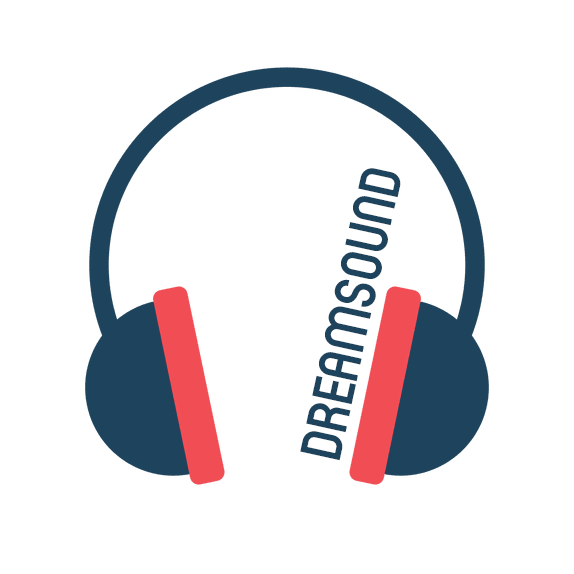
<style>
.page{position:relative;width:574px;height:574px;background:#ffffff}
.page>*{position:absolute;margin:0}
.t1{font:72px "Circula-Medium";color:#1e435c}
</style>
<div class="page">
<p class="t1" style="left:300px;top:168px;width:101px;height:293px;rotate:-78deg">dreamsound</p>
</div>
